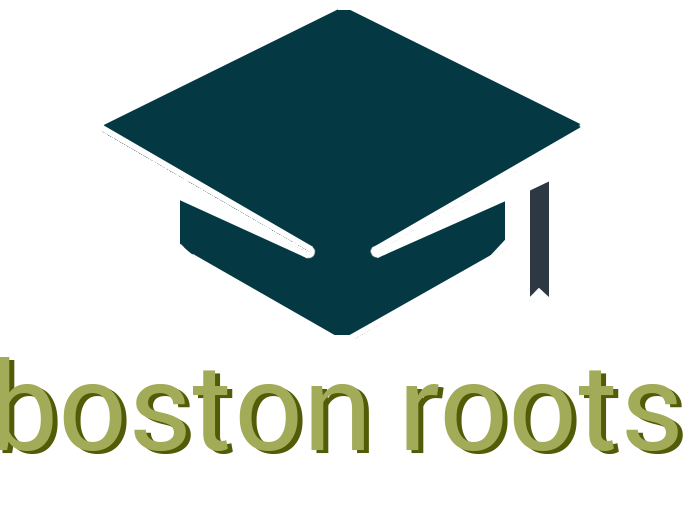
<style>
.page{position:relative;width:692px;height:518px;background:#ffffff}
.page>*{position:absolute;margin:0}
.t1{font:122px "Roboto-Regular"}
</style>
<div class="page">
<p class="t1" style="left:2px;top:360px;width:681px;height:94px">boston roots</p>
</div>
